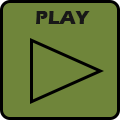
<style>
.page{position:relative;width:120px;height:120px;background:#6f853a}
.page>*{position:absolute;margin:0}
.t1{font:20px "ErasITC-Bold";color:#181818}
</style>
<div class="page">
<p class="t1" style="left:36px;top:11px;width:54px;height:13px">PLAY</p>
</div>
